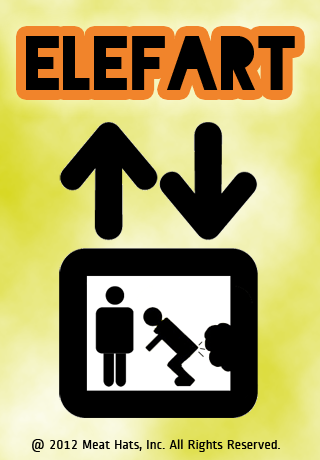
<style>
.page{position:relative;width:320px;height:460px;background:#000000}
.page>*{position:absolute;margin:0}
.t1{font:72px "Blackout-Midnight";color:#000000}
.t2{font:14px "RopaSans-Regular";color:#000000}
</style>
<div class="page">
<p class="t1" style="left:26px;top:36px;width:269px;height:54px">ELEFART</p>
<p class="t2" style="left:32px;top:439px;width:248px;height:13px">@ 2012 Meat Hats, Inc. All Rights Reserved.</p>
</div>
